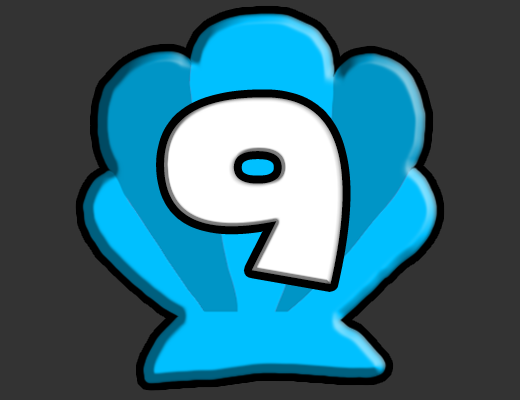
<style>
.page{position:relative;width:520px;height:400px;background:#333333}
.page>*{position:absolute;margin:0}
.t1{font:279.4px "Funhouse";color:#ffffff}
</style>
<div class="page">
<p class="t1" style="left:164px;top:97px;width:179px;height:187px">9</p>
</div>
